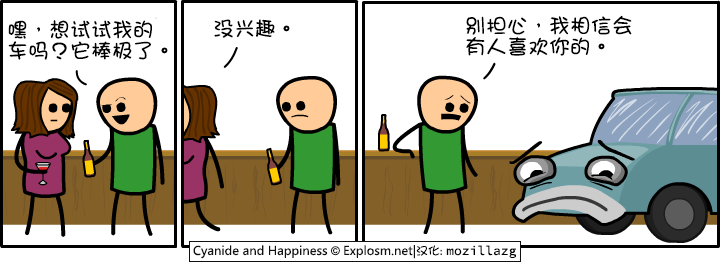
<style>
.page{position:relative;width:721px;height:262px;background:#ffffff}
.page>*{position:absolute;margin:0}
.t1{font:21px/21px "DFGirl";color:#000000}
.t2{font:21px "DFGirl";color:#000000}
</style>
<div class="page">
<p class="t1" style="left:466px;top:15px;width:166px;height:41px">别担心，我相信会<br>有人喜欢你的。</p>
<p class="t1" style="left:8px;top:20px;width:160px;height:40px">嘿，想试试我的<br>车吗？它棒极了。</p>
<p class="t2" style="left:214px;top:19px;width:76px;height:19px">没兴趣。</p>
</div>
